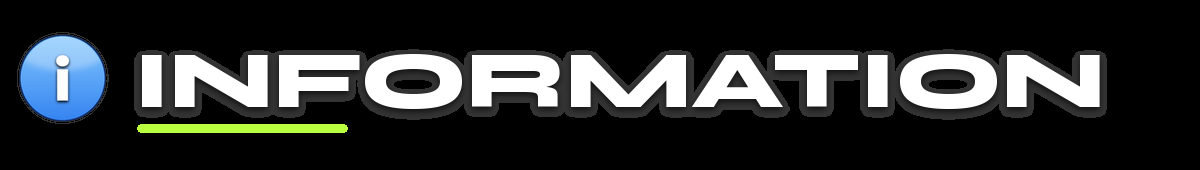
<style>
.page{position:relative;width:1200px;height:170px;background:#000000}
.page>*{position:absolute;margin:0}
.t1{font:80px "Syne-ExtraBold";color:#ffffff}
</style>
<div class="page">
<p class="t1" style="left:142px;top:54px;width:958px;height:55px">INFORMATION</p>
</div>
